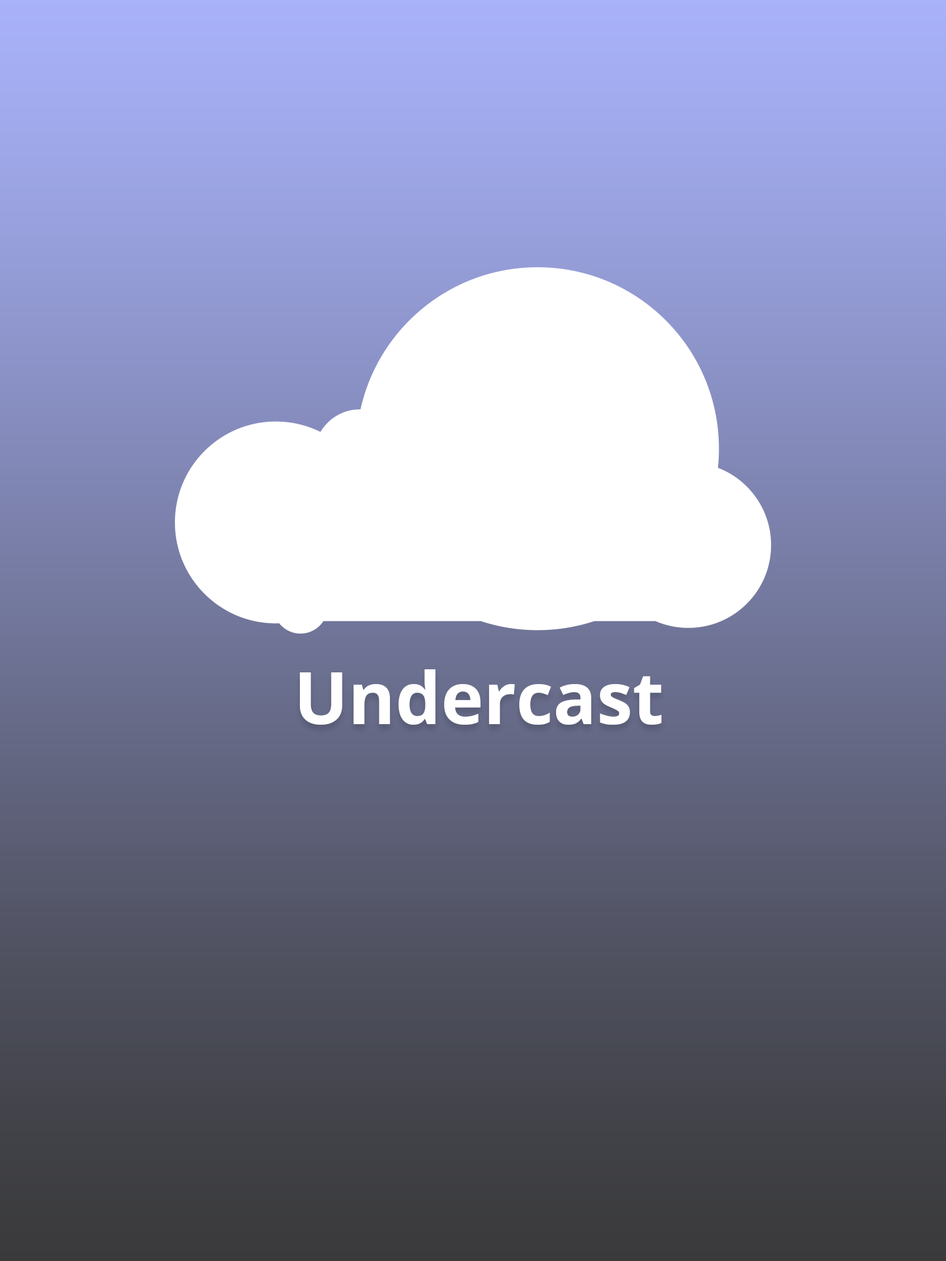
<style>
.page{position:relative;width:946px;height:1261px}
.page>*{position:absolute;margin:0}
.t1{font:72px "OpenSans-Bold";color:#ffffff}
</style>
<div class="page">
<p class="t1" style="left:299px;top:669px;width:362px;height:56px">Undercast</p>
</div>
